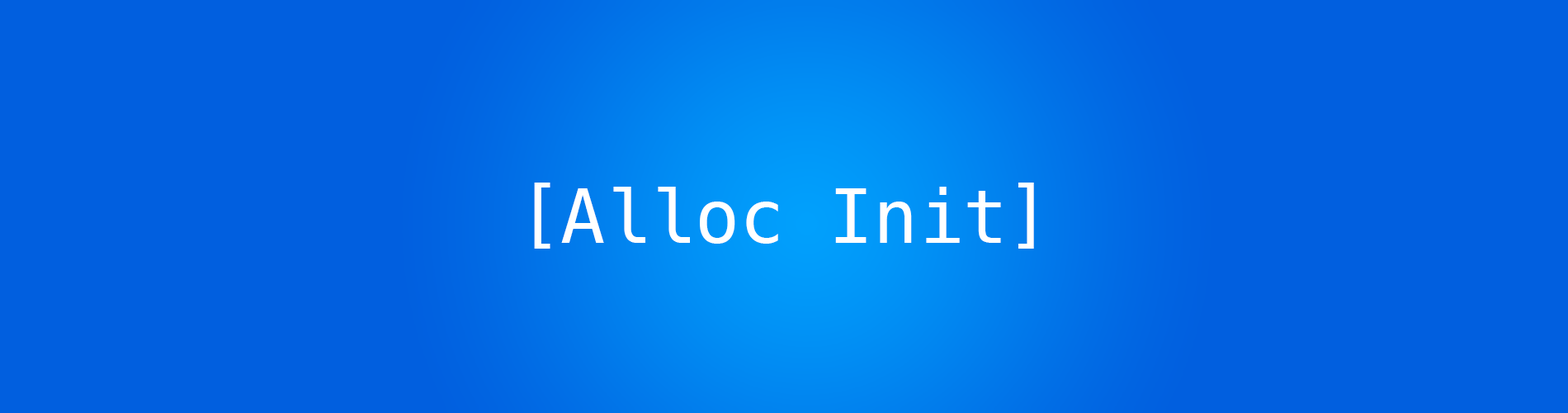
<style>
.page{position:relative;width:1568px;height:413px;background:#015fdf}
.page>*{position:absolute;margin:0}
.t1{font:74.3px "Menlo-Regular";color:#ffffff}
</style>
<div class="page">
<p class="t1" style="left:534px;top:182px;width:500px;height:66px">[Alloc Init]</p>
</div>
